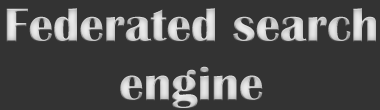
<style>
.page{position:relative;width:380px;height:110px;background:#333333}
.page>*{position:absolute;margin:0}
.t1{font:48.9px "BritannicBold";color:#d4d4d4}
</style>
<div class="page">
<p class="t1" style="left:6px;top:8px;width:370px;height:101px;text-align:center">Federated search<br>engine</p>
</div>
